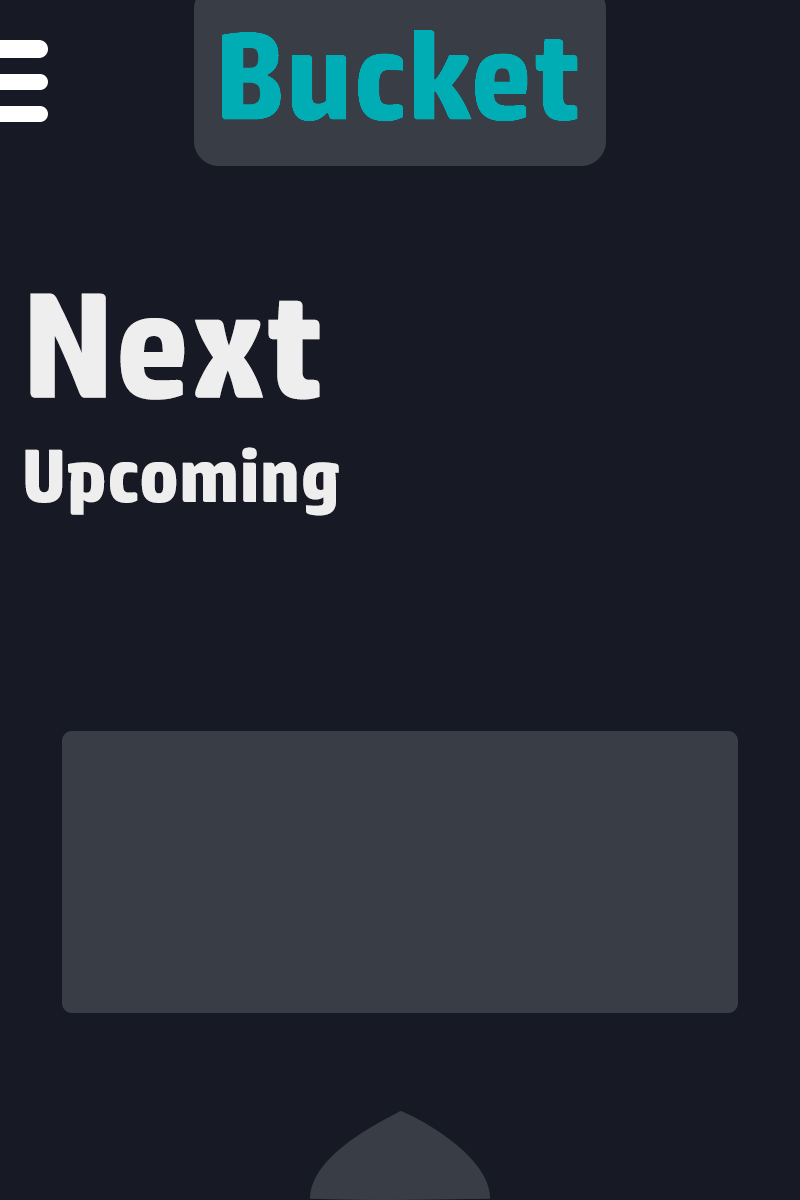
<style>
.page{position:relative;width:800px;height:1200px;background:#171a25}
.page>*{position:absolute;margin:0}
.t1{font:150px "HPSimplified-Bold";color:#eeeeee}
.t2{font:75px "HPSimplified-Bold";color:#eeeeee}
</style>
<div class="page">
<p class="t1" style="left:30px;top:293px;width:290px;height:107px">Next</p>
<p class="t2" style="left:25px;top:447px;width:314px;height:69px">Upcoming</p>
</div>
